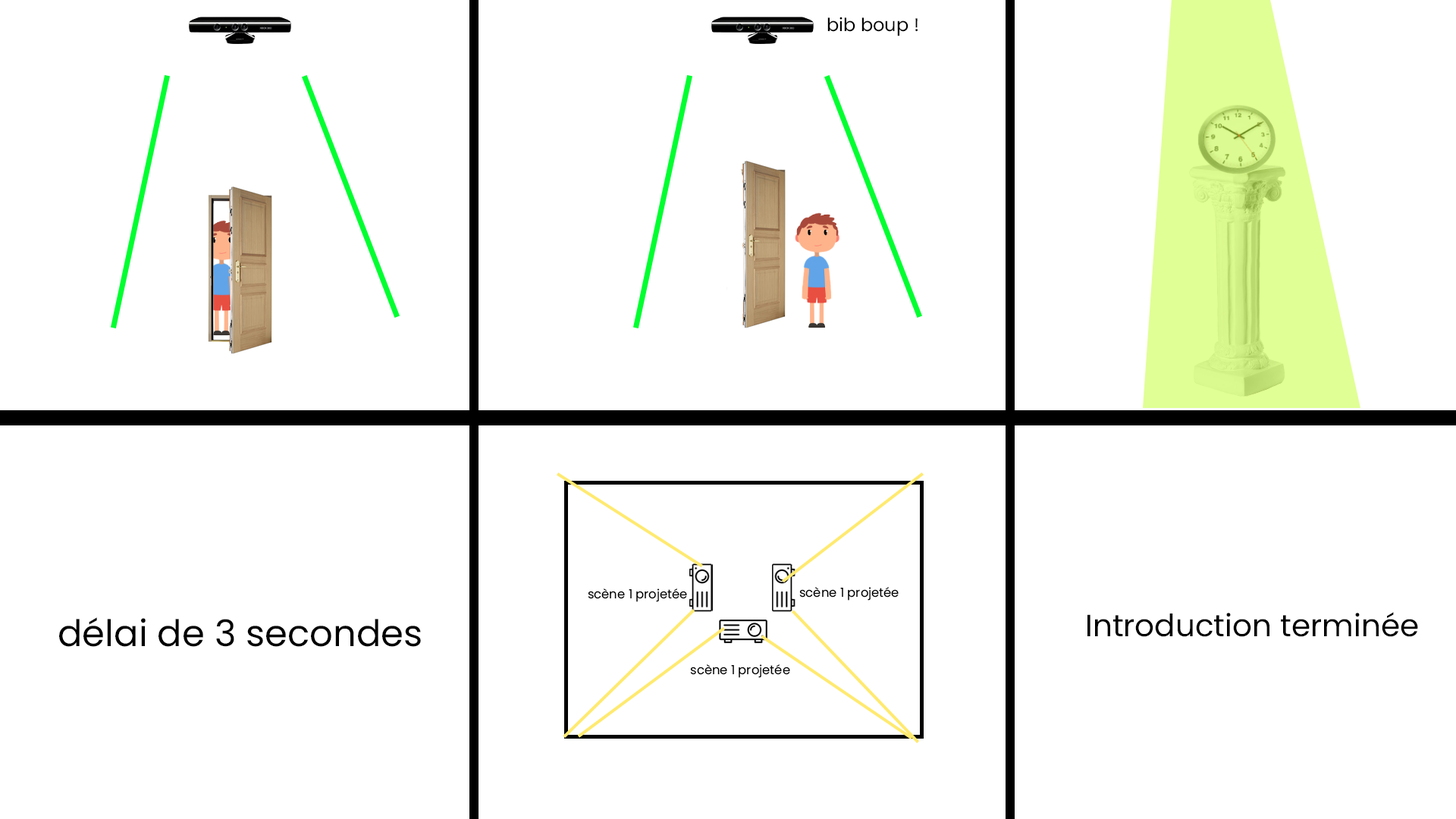
<style>
.page{position:relative;width:1456px;height:819px;background:#ffffff}
.page>*{position:absolute;margin:0}
.t1{font:18.3px "Poppins-Regular";color:#000000}
.t2{font:12.5px "Poppins-Regular";color:#000000}
.t3{font:36.5px "Poppins-Regular";color:#000000}
.t4{font:30.8px "Poppins-Regular";color:#000000}
</style>
<div class="page">
<p class="t1" style="left:827px;top:17px;width:91px;height:19px">bib boup !</p>
<p class="t2" style="left:588px;top:588px;width:99px;height:14px">scène 1 projetée</p>
<p class="t2" style="left:799px;top:587px;width:100px;height:14px">scène 1 projetée</p>
<p class="t3" style="left:59px;top:617px;width:362px;height:30px">délai de 3 secondes</p>
<p class="t4" style="left:1087px;top:612px;width:331px;height:25px">Introduction terminée</p>
<p class="t2" style="left:690px;top:664px;width:100px;height:14px">scène 1 projetée</p>
</div>
